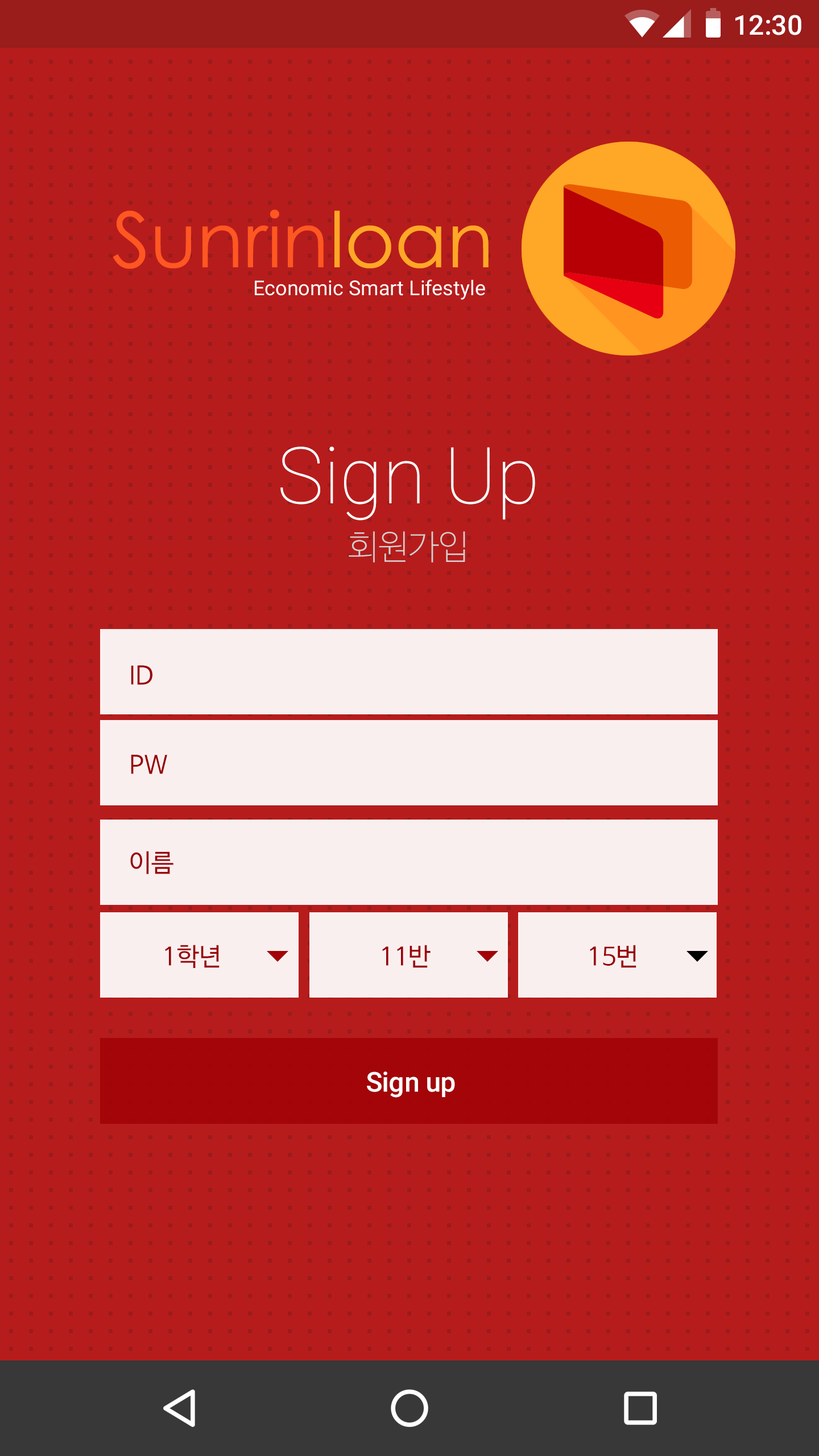
<style>
.page{position:relative;width:819px;height:1456px;background:#b71c1c}
.page>*{position:absolute;margin:0}
.t1{font:27.3px "Roboto-Medium";color:#ffffff}
.t2{font:78.5px/78.5px "Roboto-Thin";color:#ffffff}
.t3{font:34.1px/54.6px "NanumBarunGothicUltraLight";color:#d3d3d3}
.t4{font:25px "NanumBarunGothic";color:#980207}
</style>
<div class="page">
<p class="t1" style="left:735px;top:15px;width:66px;height:20px">12:30</p>
<p class="t2" style="left:280px;top:446px;width:255px;height:116px;text-align:center">Sign Up<br><span class="t3">회원가입</span></p>
<p class="t4" style="left:131px;top:665px;width:21px;height:20px">ID</p>
<p class="t4" style="left:131px;top:755px;width:36px;height:19px">PW</p>
<p class="t4" style="left:130px;top:851px;width:43px;height:23px">이름</p>
<p class="t4" style="left:165px;top:945px;width:55px;height:23px">1학년</p>
<p class="t4" style="left:382px;top:945px;width:49px;height:23px">11반</p>
<p class="t4" style="left:590px;top:945px;width:46px;height:23px">15번</p>
<p class="t1" style="left:367px;top:1072px;width:88px;height:26px">Sign up</p>
</div>
